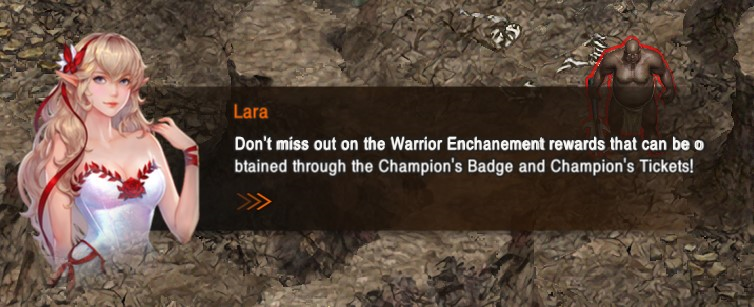
<style>
.page{position:relative;width:754px;height:307px}
.page>*{position:absolute;margin:0}
.t1{font:17.3px "ArialMT";letter-spacing:0.071em;color:#f7f6f2;scale:0.8 1}
</style>
<div class="page">
<p class="t1" style="left:236px;top:136px;width:466px;height:14px">Don’t miss out on the Warrior Enchanement rewards that can be o</p>
</div>
